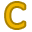
<style>
.page{position:relative;width:32px;height:32px;background:#ffffff}
.page>*{position:absolute;margin:0}
.t1{font:33.3px "Tahoma";color:#efb400}
</style>
<div class="page">
<p class="t1" style="left:6px;top:3px;width:19px;height:25px">C</p>
</div>
